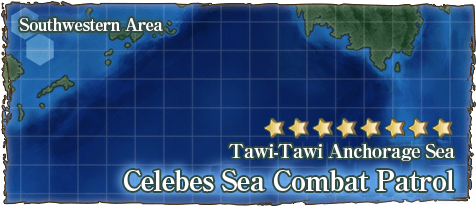
<style>
.page{position:relative;width:476px;height:206px}
.page>*{position:absolute;margin:0}
.t1{font:17px "RyuminPro-ExBold";letter-spacing:-0.04em;color:#ffffff}
.t2{font:19px "RyuminPro-ExBold";letter-spacing:-0.04em;color:#ffffff}
.t3{font:28px "RyuminPro-ExBold";letter-spacing:-0.04em;color:#ffffff}
</style>
<div class="page">
<p class="t1" style="left:19px;top:18px;width:144px;height:14px">Southwestern Area</p>
<p class="t2" style="left:229px;top:143px;width:226px;height:18px">Tawi-Tawi Anchorage Sea</p>
<p class="t3" style="left:124px;top:170px;width:330px;height:22px">Celebes Sea Combat Patrol</p>
</div>
